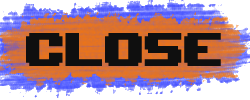
<style>
.page{position:relative;width:250px;height:100px;background:#ffffff}
.page>*{position:absolute;margin:0}
.t1{font:66px "UpheavalTT-BRK-";color:#0f0f0f}
</style>
<div class="page">
<p class="t1" style="left:26px;top:33px;width:195px;height:33px">CLOSE</p>
</div>
